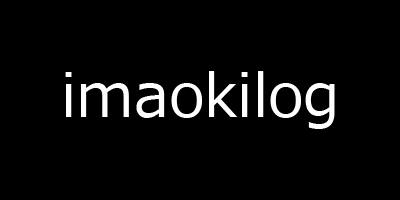
<style>
.page{position:relative;width:400px;height:200px;background:#000000}
.page>*{position:absolute;margin:0}
.t1{font:60px "Meiryo";color:#ffffff}
</style>
<div class="page">
<p class="t1" style="left:65px;top:71px;width:270px;height:58px">imaokilog</p>
</div>
